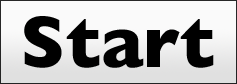
<style>
.page{position:relative;width:237px;height:84px;background:#fafafa}
.page>*{position:absolute;margin:0}
.t1{font:74.2px "GillSans-Bold";color:#000000}
</style>
<div class="page">
<p class="t1" style="left:24px;top:16px;width:190px;height:52px">Start</p>
</div>
